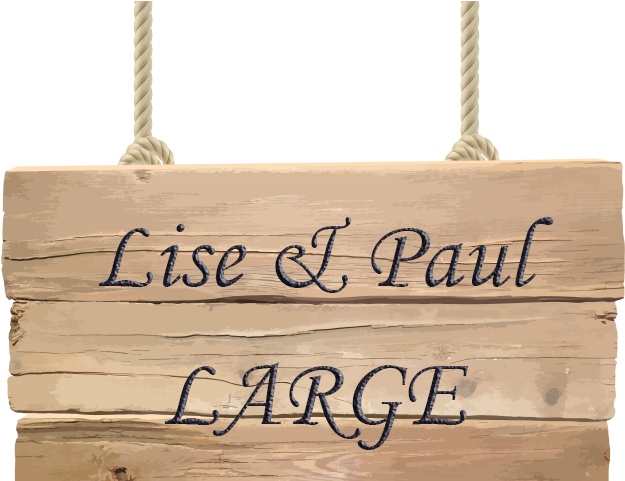
<style>
.page{position:relative;width:625px;height:481px;background:#ffffff}
.page>*{position:absolute;margin:0}
.t1{font:100px/69px "MonotypeCorsiva"}
</style>
<div class="page">
<p class="t1" style="left:98px;top:217px;width:456px;height:233px;text-align:center">Lise &amp; Paul<br><br>LARGE</p>
</div>
